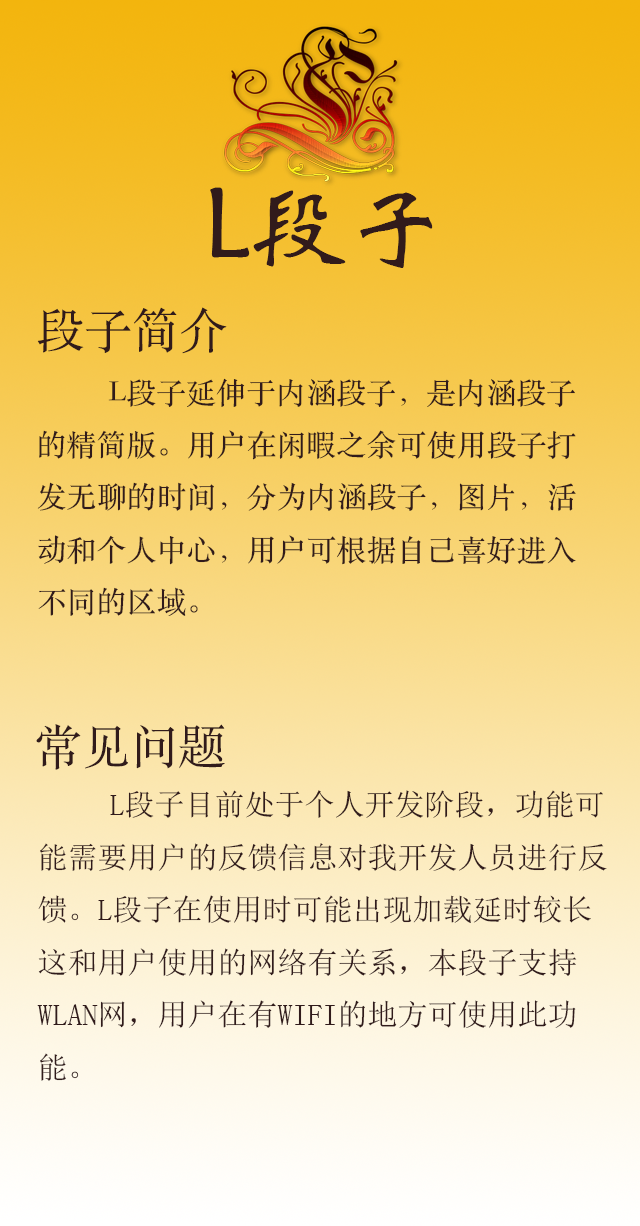
<style>
.page{position:relative;width:640px;height:1226px}
.page>*{position:absolute;margin:0}
.t1{font:99px "STXinwei";color:#311b1b}
.t2{font:48px "STSongti-SC-Regular";color:#311b1b}
.t3{font:30px "STSongti-SC-Regular";color:#311b1b}
.t4{font:30px "DFWaWaSC-W5";color:#311b1b}
.t5{font:30px "SimSun";color:#311b1b}
</style>
<div class="page">
<p class="t1" style="left:210px;top:187px;width:223px;height:81px">L段子</p>
<p class="t2" style="left:37px;top:307px;width:190px;height:47px">段子简介</p>
<p class="t3" style="left:37px;top:378px;width:539px;height:238px"><span class="t4">  </span>L段子延伸于内涵段子，是内涵段子<br>的精简版。用户在闲暇之余可使用段子打<br>发无聊的时间，分为内涵段子，图片，活<br>动和个人中心，用户可根据自己喜好进入<br>不同的区域。</p>
<p class="t2" style="left:36px;top:724px;width:189px;height:46px">常见问题</p>
<p class="t5" style="left:37px;top:790px;width:570px;height:291px"><span class="t4">  </span>L段子目前处于个人开发阶段，功能可<br>能需要用户的反馈信息对我开发人员进行反<br>馈。L段子在使用时可能出现加载延时较长<br>这和用户使用的网络有关系，本段子支持<br>WLAN网，用户在有WIFI的地方可使用此功<br>能。</p>
</div>
